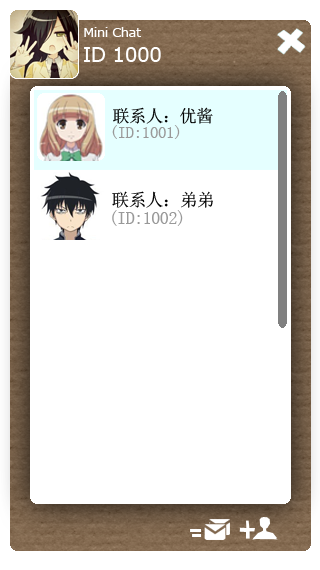
<style>
.page{position:relative;width:320px;height:570px;background:#ffffff}
.page>*{position:absolute;margin:0}
.t1{font:12.6px "MSReferenceSansSerif";letter-spacing:-0.025em;color:#ffffff}
.t2{font:20.2px "MSReferenceSansSerif";letter-spacing:-0.025em;color:#ffffff}
.t3{font:17.5px "SimSun";letter-spacing:-0.025em;color:#000000}
.t4{font:18px "SimSun";letter-spacing:-0.025em;color:#999999}
</style>
<div class="page">
<p class="t1" style="left:84px;top:27px;width:57px;height:10px">Mini Chat</p>
<p class="t2" style="left:84px;top:47px;width:77px;height:15px">ID 1000</p>
<p class="t3" style="left:112px;top:191px;width:101px;height:17px">联系人：弟弟</p>
<p class="t4" style="left:112px;top:210px;width:71px;height:16px">(ID:1002)</p>
</div>
